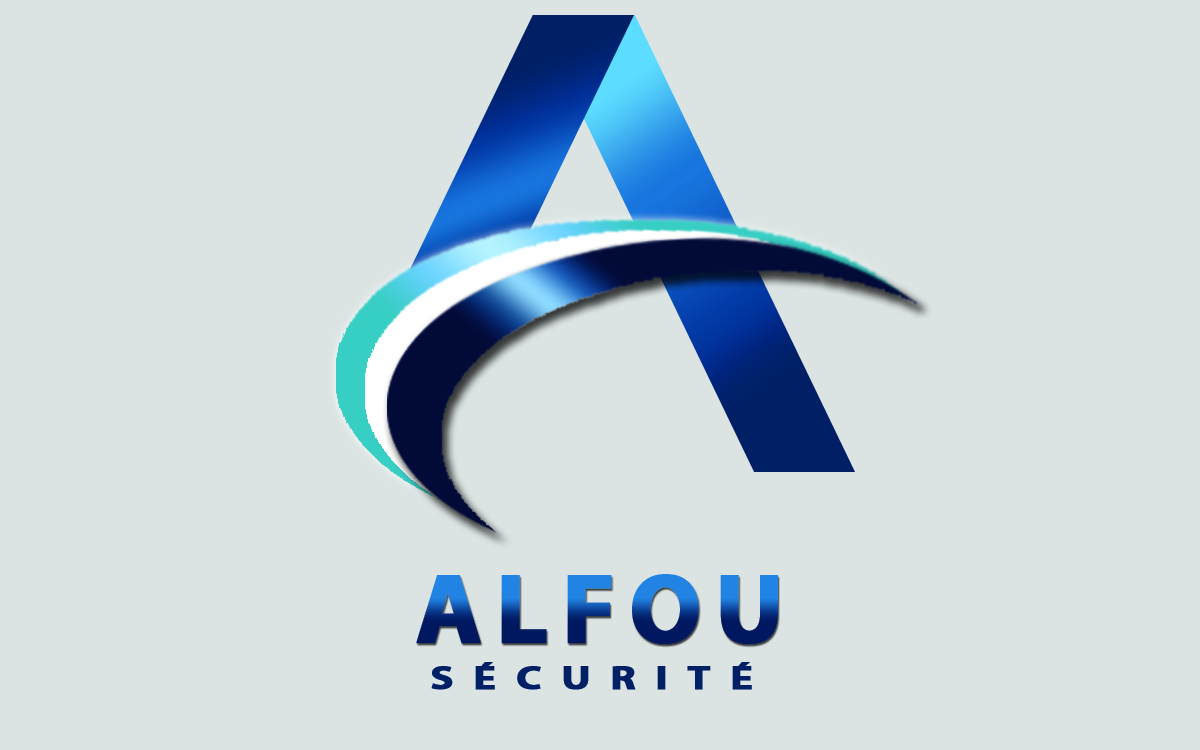
<style>
.page{position:relative;width:1200px;height:750px;background:#dbe4e3}
.page>*{position:absolute;margin:0}
.t1{font:100px "MyriadPro-Bold";letter-spacing:0.12em;font-weight:bold}
.t2{font:32.9px "MyriadPro-Bold";letter-spacing:0.46em;color:#001f65;font-weight:bold;scale:1.27 1}
</style>
<div class="page">
<p class="t1" style="left:416px;top:574px;width:362px;height:71px">ALFOU</p>
<p class="t2" style="left:431px;top:662px;width:321px;height:28px">SÉCURITÉ</p>
</div>
